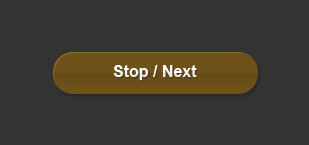
<style>
.page{position:relative;width:309px;height:145px;background:#333333}
.page>*{position:absolute;margin:0}
.t1{font:16px "Arial-BoldMT";color:#ffffff}
</style>
<div class="page">
<p class="t1" style="left:113px;top:65px;width:84px;height:15px">Stop / Next</p>
</div>
